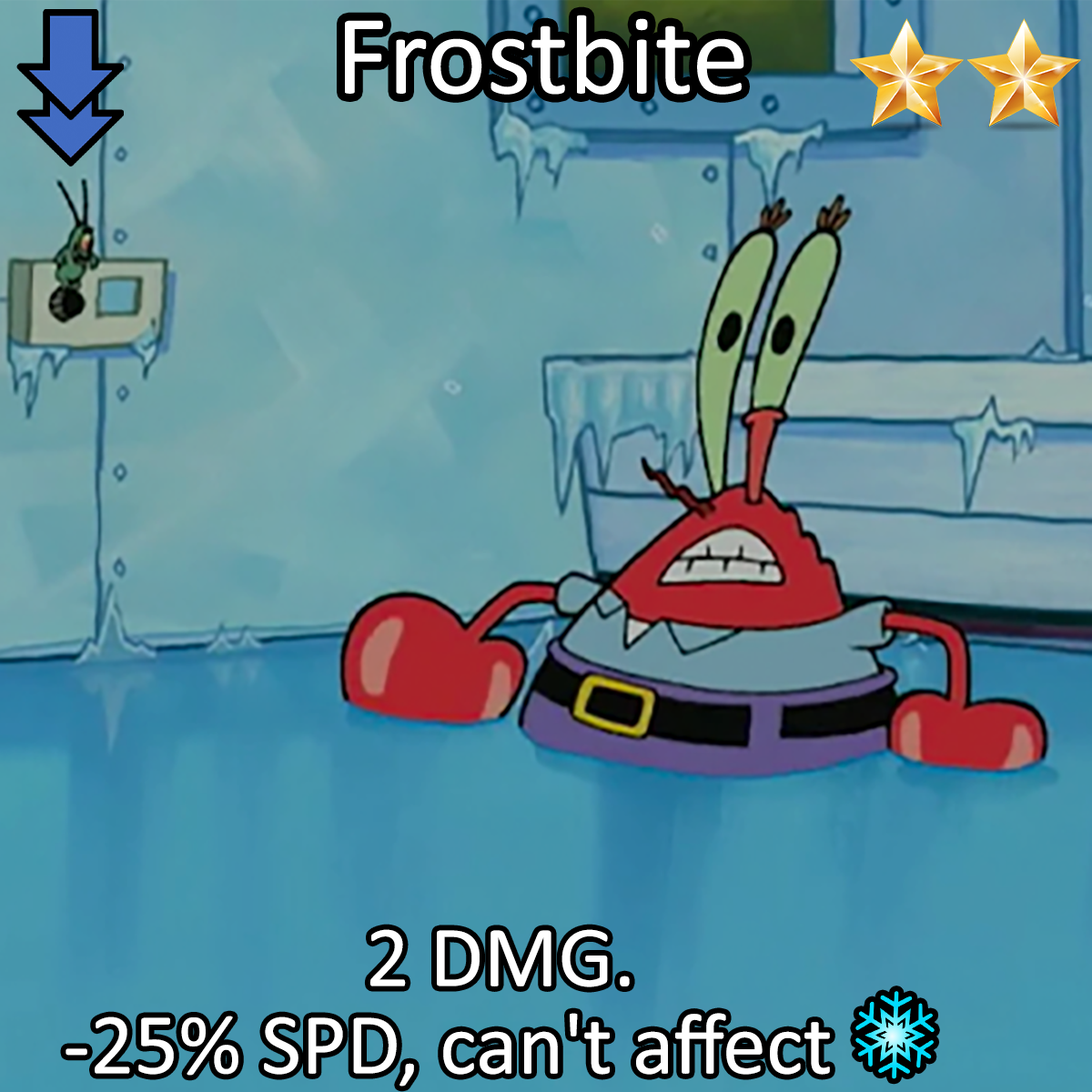
<style>
.page{position:relative;width:1092px;height:1092px}
.page>*{position:absolute;margin:0}
.t1{font:196.6px "Calibri";color:#ffffff}
.t2{font:150.1px/87.4px "Calibri";color:#ffffff}
.t3{font:150.1px/87.4px "stoogedings-Regular";color:#ffffff}
</style>
<div class="page">
<p class="t1" style="left:345px;top:15px;width:399px;height:80px">Frostbite</p>
<p class="t2" style="left:66px;top:929px;width:869px;height:158px;text-align:center">2 DMG.<br>-25% SPD, can't affect <span class="t3">[ice]</span></p>
</div>
